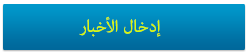
<style>
.page{position:relative;width:248px;height:53px}
.page>*{position:absolute;margin:0}
.t1{font:24px "AdobeArabic-Regular";color:#dafa05}
</style>
<div class="page">
<p class="t1" style="left:79px;top:16px;width:82px;height:21px">إدخال الأخبار</p>
</div>
